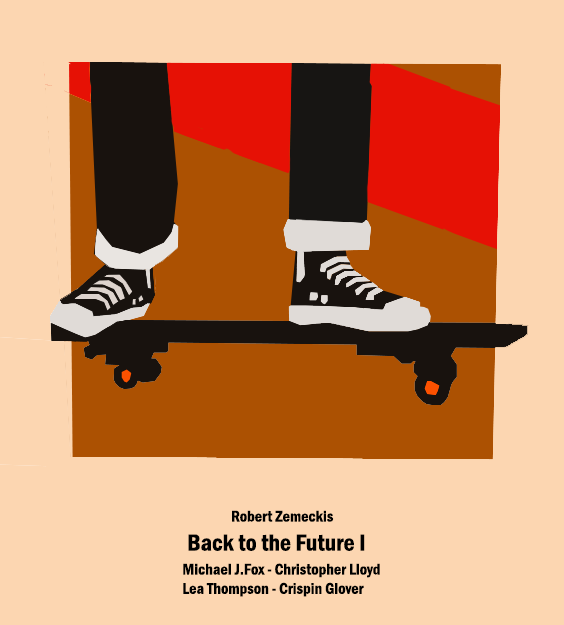
<style>
.page{position:relative;width:564px;height:625px;background:#fcd6b1}
.page>*{position:absolute;margin:0}
.t1{font:16px "FranklinGothic-DemiCond";color:#000000}
.t2{font:24px "FranklinGothic-DemiCond";color:#000000}
</style>
<div class="page">
<p class="t1" style="left:232px;top:510px;width:102px;height:12px">Robert Zemeckis</p>
<p class="t2" style="left:188px;top:534px;width:177px;height:17px">Back to the Future I</p>
<p class="t1" style="left:183px;top:563px;width:197px;height:34px">Michael J.Fox - Christopher Lloyd<br>Lea Thompson - Crispin Glover</p>
</div>
